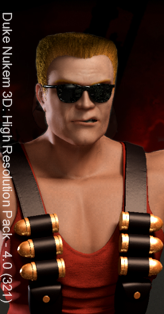
<style>
.page{position:relative;width:164px;height:314px}
.page>*{position:absolute;margin:0}
.t1{font:13px "ArialMT";color:#c1bebd}
</style>
<div class="page">
<p class="t1" style="left:0px;top:12px;width:13px;height:291px;rotate:90deg">Duke Nukem 3D: High Resolution Pack - 4.0 (321)</p>
</div>
